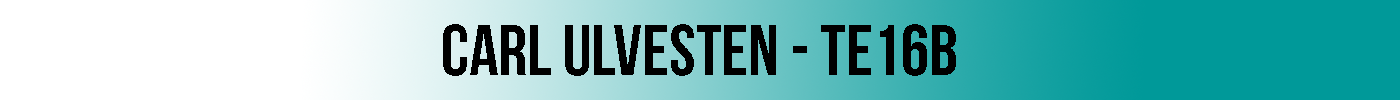
<style>
.page{position:relative;width:1400px;height:100px;background:#ffffff}
.page>*{position:absolute;margin:0}
.t1{font:72px "BebasNeue";color:#000000}
</style>
<div class="page">
<p class="t1" style="left:443px;top:24px;width:513px;height:52px">CARL ULVESTEN - TE16B</p>
</div>
